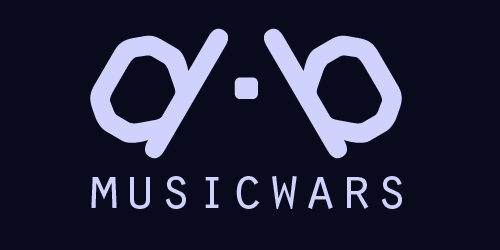
<style>
.page{position:relative;width:500px;height:250px;background:#090b1c}
.page>*{position:absolute;margin:0}
.t1{font:198.3px "OCRAStd";color:#ced2fc}
.t2{font:117.4px "OCRAStd";color:#ced2fc}
.t3{font:60px "OratorStd";color:#ced2fc}
</style>
<div class="page">
<p class="t1" style="left:90px;top:28px;width:138px;height:131px;rotate:30deg">d</p>
<p class="t1" style="left:264px;top:28px;width:138px;height:131px;rotate:150deg">d</p>
<p class="t2" style="left:234px;top:77px;width:24px;height:22px">.</p>
<p class="t3" style="left:91px;top:176px;width:311px;height:33px">musicwars</p>
</div>
